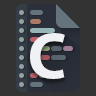
<style>
.page{position:relative;width:96px;height:96px;background:#333333}
.page>*{position:absolute;margin:0}
.t1{font:65px "MyriadPro-Bold";color:#eff1f5}
</style>
<div class="page">
<p class="t1" style="left:30px;top:33px;width:35px;height:46px">C</p>
</div>
